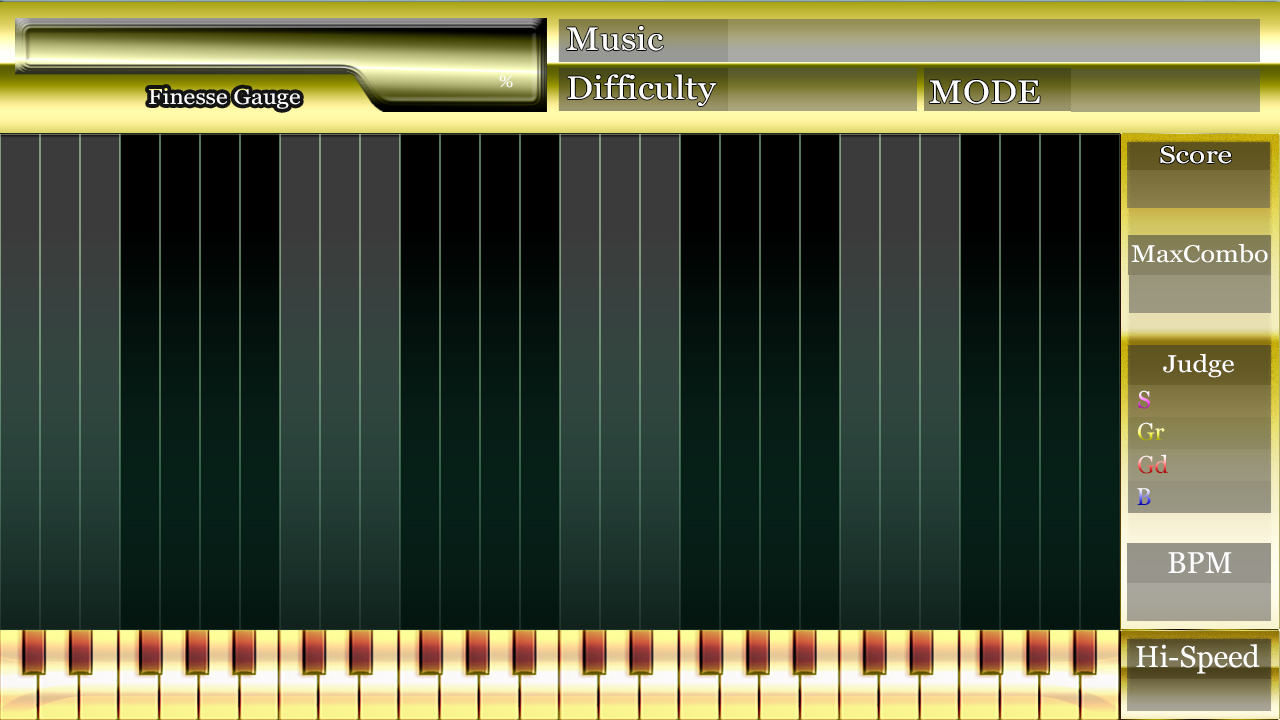
<style>
.page{position:relative;width:1280px;height:720px}
.page>*{position:absolute;margin:0}
.t1{font:32.4px "Vani";color:#ffffff;scale:1.11 1}
.t2{font:16.2px "Vani";color:#ffffff;scale:1.11 1}
.t3{font:21.6px "Vani";color:#ffffff;scale:1.11 1}
.t4{font:24px "Vani";color:#ffffff;scale:1.25 1}
.t5{font:24px "Vani";color:#ffffff;scale:1.12 1}
.t6{font:24px "Vani"}
.t7{font:30px "Vani";color:#ffffff}
</style>
<div class="page">
<p class="t1" style="left:566px;top:26px;width:98px;height:25px">Music</p>
<p class="t2" style="left:499px;top:75px;width:14px;height:13px">%</p>
<p class="t1" style="left:567px;top:74px;width:150px;height:32px">Difficulty</p>
<p class="t3" style="left:149px;top:88px;width:151px;height:21px">Finesse Gauge</p>
<p class="t1" style="left:929px;top:80px;width:111px;height:24px">MODE</p>
<p class="t4" style="left:1160px;top:146px;width:72px;height:18px">Score</p>
<p class="t5" style="left:1131px;top:243px;width:137px;height:20px">MaxCombo</p>
<p class="t5" style="left:1163px;top:353px;width:71px;height:25px">Judge</p>
<p class="t6" style="left:1138px;top:390px;width:12px;height:19px">S</p>
<p class="t6" style="left:1138px;top:422px;width:27px;height:19px">Gr</p>
<p class="t6" style="left:1138px;top:454px;width:30px;height:20px">Gd</p>
<p class="t6" style="left:1137px;top:488px;width:14px;height:17px">B</p>
<p class="t7" style="left:1168px;top:552px;width:64px;height:21px">BPM</p>
<p class="t7" style="left:1136px;top:644px;width:124px;height:30px">Hi-Speed</p>
</div>
